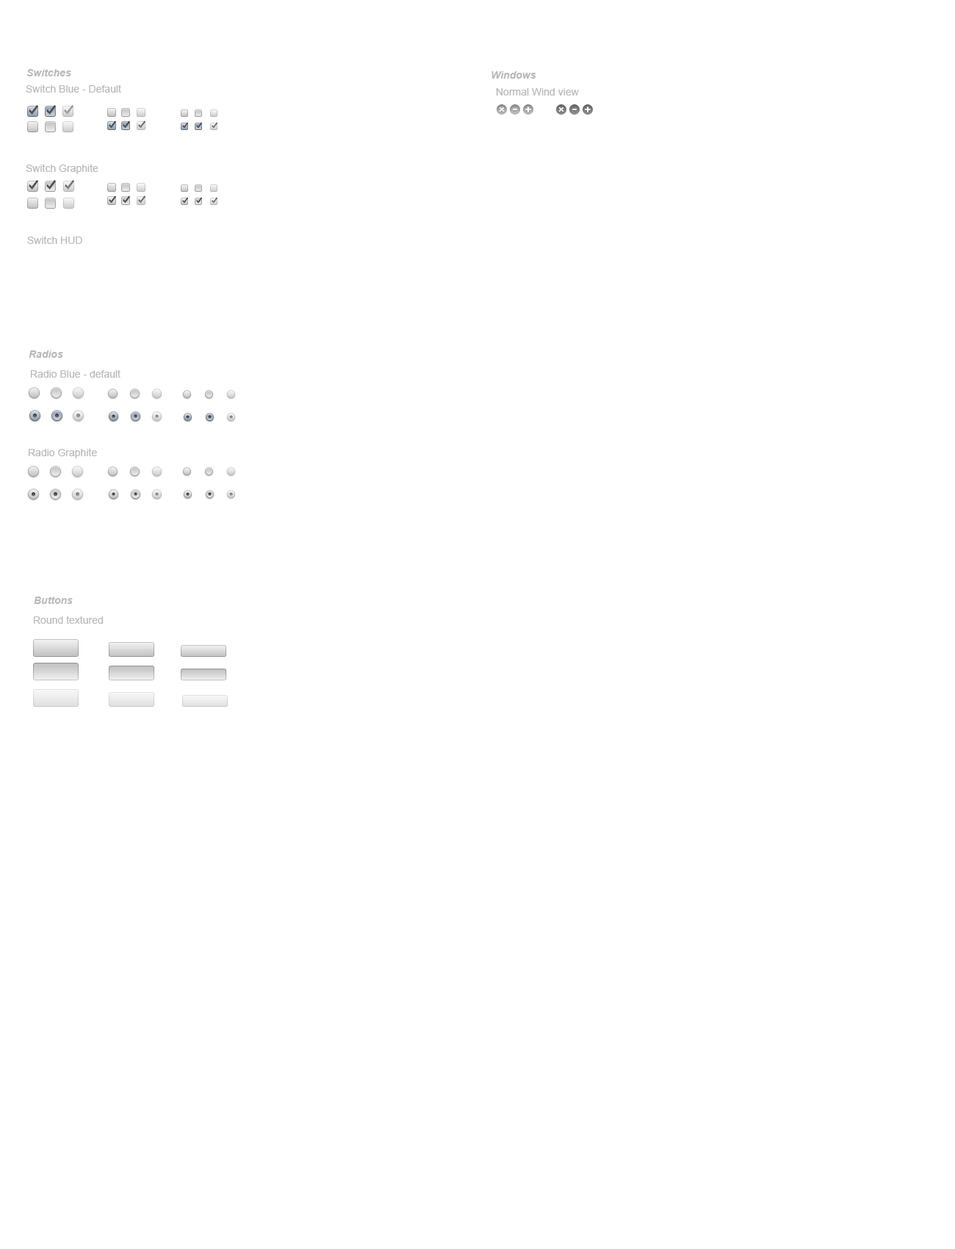
<style>
.page{position:relative;width:955px;height:1249px;background:#ffffff}
.page>*{position:absolute;margin:0}
.t1{font:10.3px "Arial-BoldItalicMT";color:#b8b8b8}
.t2{font:10.3px "ArialMT";color:#b8b8b8}
.t3{font:10.3px "Arial-BoldItalicMT";color:#bababa}
.t4{font:10.3px "ArialMT";color:#bababa}
</style>
<div class="page">
<p class="t1" style="left:26px;top:69px;width:45px;height:7px">Switches</p>
<p class="t1" style="left:491px;top:71px;width:45px;height:8px">Windows</p>
<p class="t2" style="left:26px;top:84px;width:95px;height:9px">Switch Blue - Default</p>
<p class="t2" style="left:496px;top:88px;width:83px;height:7px">Normal Wind view</p>
<p class="t2" style="left:26px;top:164px;width:72px;height:10px">Switch Graphite</p>
<p class="t2" style="left:27px;top:236px;width:55px;height:8px">Switch HUD</p>
<p class="t1" style="left:29px;top:350px;width:34px;height:8px">Radios</p>
<p class="t2" style="left:31px;top:369px;width:89px;height:9px">Radio Blue - default</p>
<p class="t2" style="left:29px;top:448px;width:68px;height:10px">Radio Graphite</p>
<p class="t3" style="left:34px;top:596px;width:39px;height:8px">Buttons</p>
<p class="t4" style="left:34px;top:616px;width:69px;height:8px">Round textured</p>
</div>
